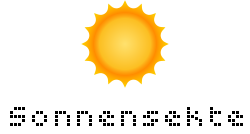
<style>
.page{position:relative;width:250px;height:134px;background:#ffffff}
.page>*{position:absolute;margin:0}
.t1{font:24px "Zado";letter-spacing:0.09em;color:#000000;font-weight:bold}
</style>
<div class="page">
<p class="t1" style="left:10px;top:107px;width:233px;height:19px">Sonnensekte</p>
</div>
